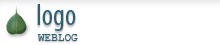
<style>
.page{position:relative;width:220px;height:45px;background:#ffffff}
.page>*{position:absolute;margin:0}
.t1{font:30px "MyriadPro-Cond";color:#306070}
.t2{font:11px "CourierNewPSMT";color:#2f5e6e}
</style>
<div class="page">
<p class="t1" style="left:37px;top:4px;width:39px;height:27px">logo</p>
<p class="t2" style="left:38px;top:34px;width:40px;height:7px">WEBLOG</p>
</div>
